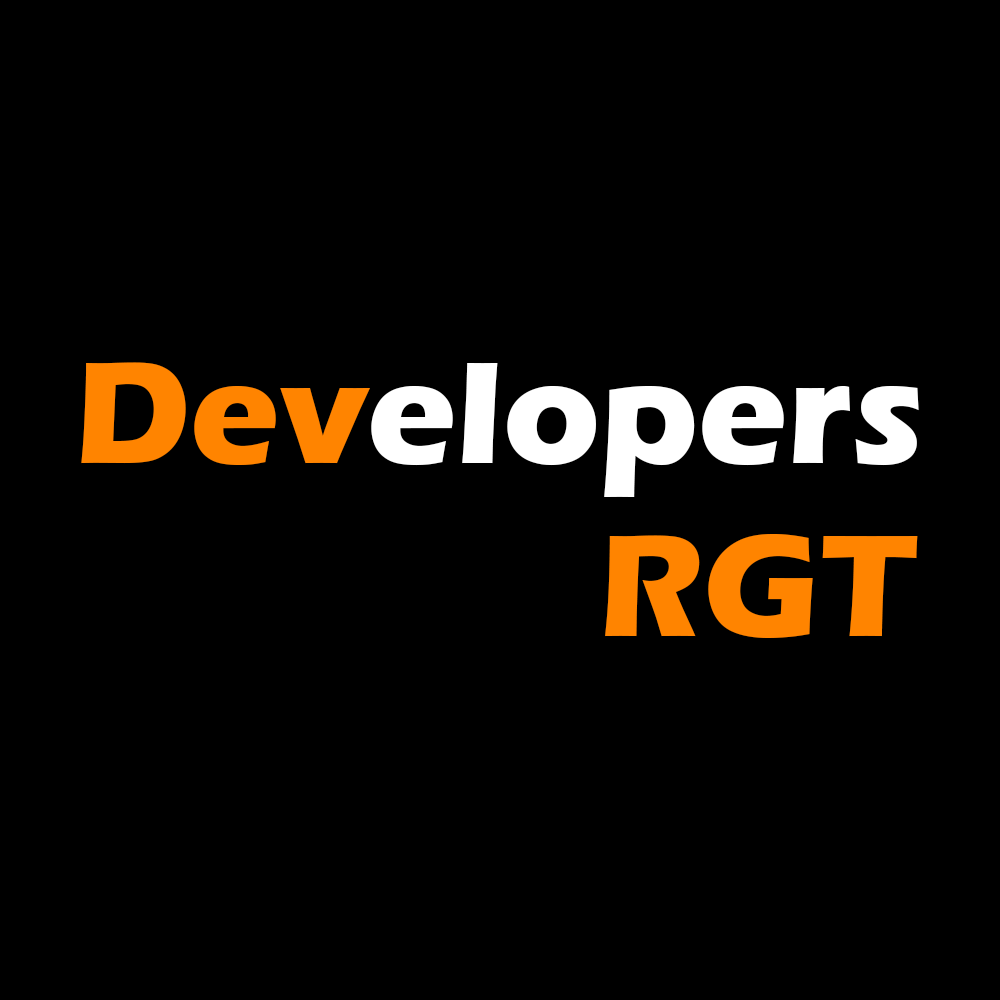
<style>
.page{position:relative;width:1000px;height:1000px;background:#000000}
.page>*{position:absolute;margin:0}
.t1{font:150px "ErasITC-Bold";color:#ffffff}
.t2{font:150px "ErasITC-Bold";color:#ff8400}
</style>
<div class="page">
<p class="t1" style="left:81px;top:362px;width:838px;height:135px"><span class="t2">Dev</span>elopers</p>
<p class="t2" style="left:605px;top:534px;width:313px;height:104px">RGT</p>
</div>
